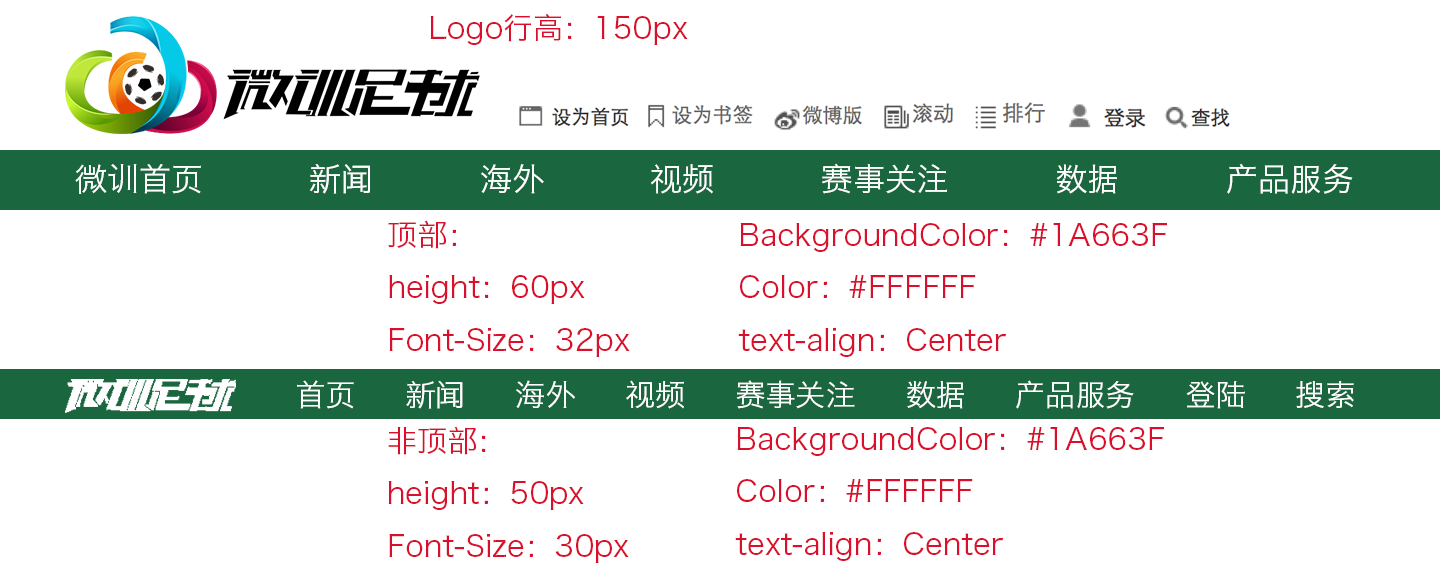
<style>
.page{position:relative;width:1440px;height:567px;background:#ffffff}
.page>*{position:absolute;margin:0}
.t1{font:30px "HiraginoSansGB-W3";color:#da0f2c}
.t2{font:32px "HiraginoSansGB-W3";color:#ffffff}
.t3{font:30px "HiraginoSansGB-W3";color:#ffffff}
</style>
<div class="page">
<p class="t1" style="left:430px;top:13px;width:258px;height:32px">Logo行高：150px</p>
<p class="t2" style="left:75px;top:163px;width:1278px;height:31px">微训首页          新闻          海外          视频          赛事关注          数据          产品服务</p>
<p class="t1" style="left:388px;top:220px;width:242px;height:137px">顶部：<br>height：60px<br>Font-Size：32px</p>
<p class="t1" style="left:738px;top:223px;width:429px;height:134px">BackgroundColor：#1A663F<br>Color：#FFFFFF<br>text-align：Center</p>
<p class="t3" style="left:297px;top:380px;width:1057px;height:29px">首页     新闻     海外     视频     赛事关注     数据     产品服务     登陆     搜索</p>
<p class="t1" style="left:388px;top:426px;width:241px;height:137px">非顶部：<br>height：50px<br>Font-Size：30px</p>
<p class="t1" style="left:735px;top:427px;width:429px;height:134px">BackgroundColor：#1A663F<br>Color：#FFFFFF<br>text-align：Center</p>
</div>
